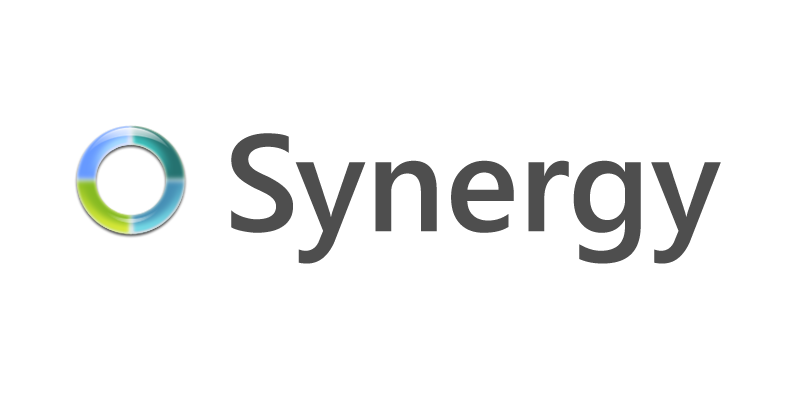
<style>
.page{position:relative;width:800px;height:400px;background:#ffffff}
.page>*{position:absolute;margin:0}
.t1{font:137.4px "SegoeUI-SemiBold";color:#4e4e4e}
</style>
<div class="page">
<p class="t1" style="left:231px;top:133px;width:490px;height:131px">Synergy</p>
</div>
